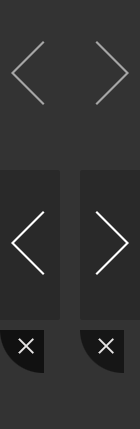
<style>
.page{position:relative;width:140px;height:429px;background:#333333}
.page>*{position:absolute;margin:0}
.t1{font:33.9px "BankGothicBT-Light";color:#e7e5e5}
</style>
<div class="page">
<p class="t1" style="left:18px;top:338px;width:16px;height:16px;rotate:45deg">+</p>
<p class="t1" style="left:98px;top:338px;width:16px;height:16px;rotate:45deg">+</p>
</div>
